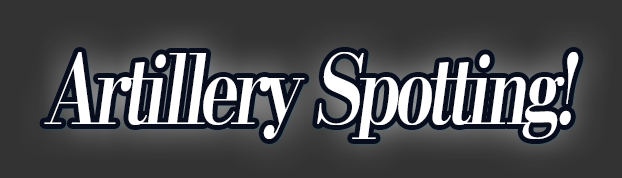
<style>
.page{position:relative;width:622px;height:178px;background:#333333}
.page>*{position:absolute;margin:0}
.t1{font:96px "KochoStd-Heavy";letter-spacing:-0.08em;color:#ffffff;font-style:italic;scale:0.75 1}
</style>
<div class="page">
<p class="t1" style="left:44px;top:52px;width:535px;height:87px">Artillery Spotting!</p>
</div>
